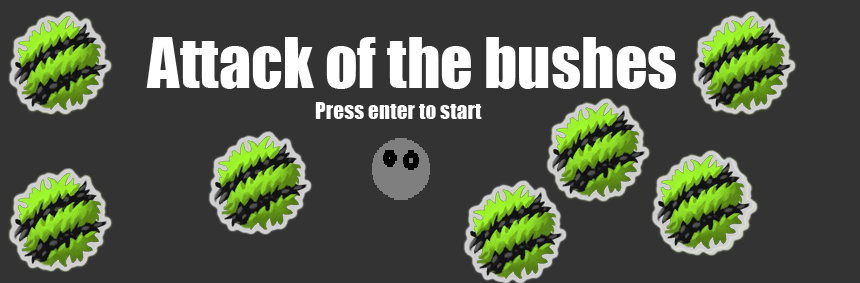
<style>
.page{position:relative;width:860px;height:283px;background:#333333}
.page>*{position:absolute;margin:0}
.t1{font:64px "Impact";color:#ffffff}
.t2{font:12px "MyriadPro-Regular";color:#ffffff}
.t3{font:21.3px "Impact";color:#ffffff}
</style>
<div class="page">
<p class="t1" style="left:146px;top:37px;width:530px;height:52px"><span class="t2"> </span>Attack of the bushes</p>
<p class="t3" style="left:315px;top:102px;width:167px;height:17px">Press enter to start</p>
</div>
